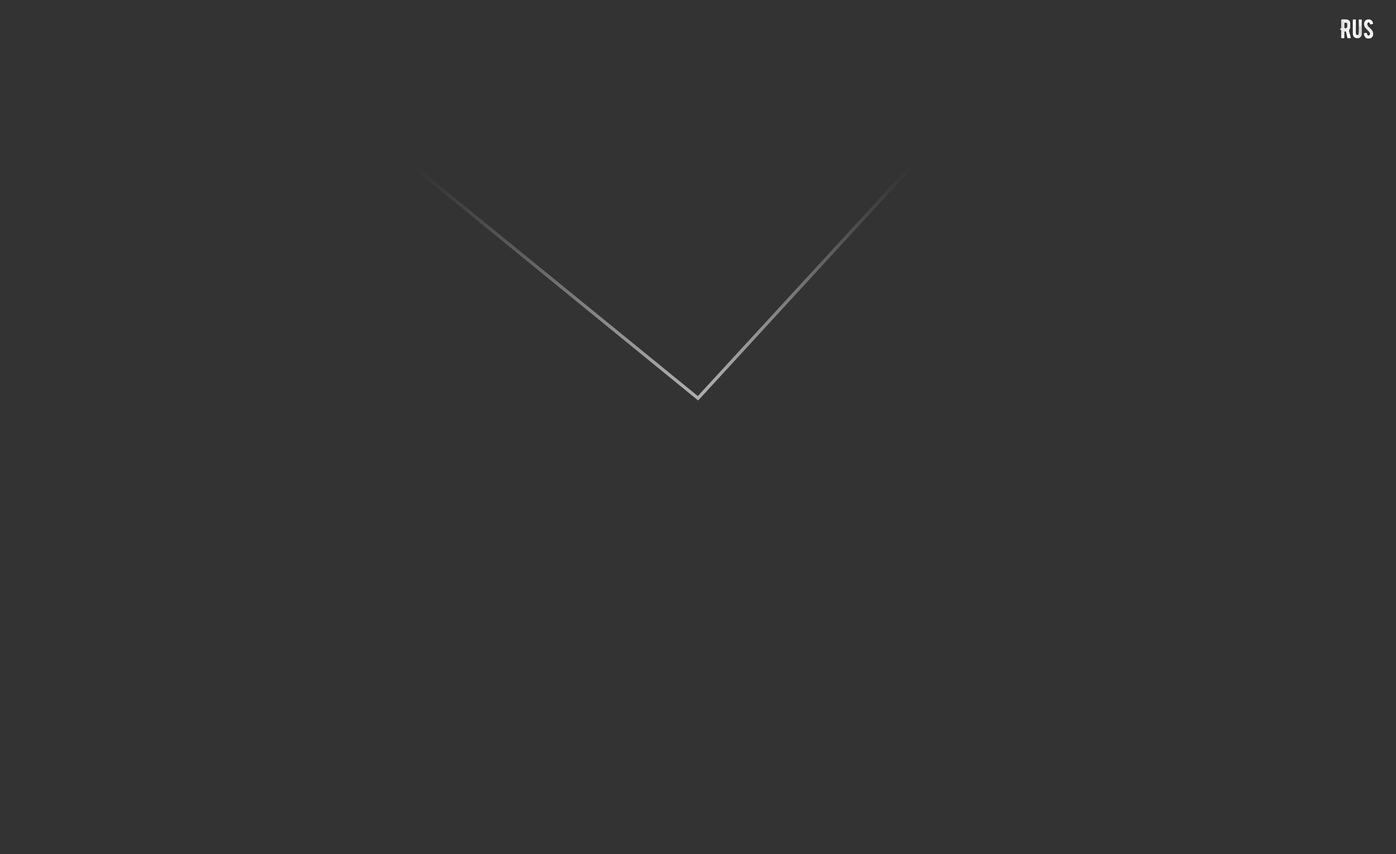
<style>
.page{position:relative;width:1396px;height:854px;background:#333333}
.page>*{position:absolute;margin:0}
.t1{font:26.9px "BERNIERDISTRESSED";color:#ffffff}
</style>
<div class="page">
<p class="t1" style="left:1340px;top:19px;width:33px;height:20px">Rus</p>
</div>
